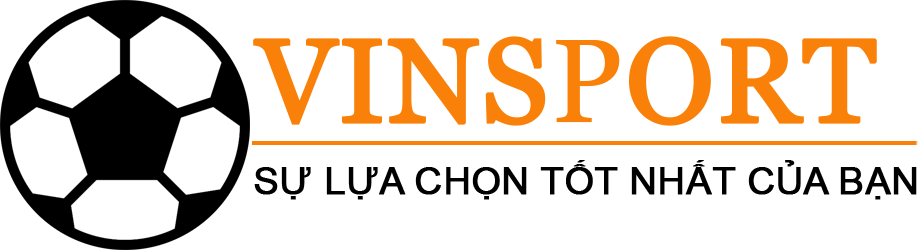
<style>
.page{position:relative;width:918px;height:250px;background:#ffffff}
.page>*{position:absolute;margin:0}
.t1{font:118px "Georgia";color:#fa8109;text-transform:uppercase;font-weight:bold}
.t2{font:37.6px "ArialMT";color:#000000;text-transform:uppercase;font-weight:bold}
</style>
<div class="page">
<p class="t1" style="left:253px;top:36px;width:624px;height:90px">Vinsport</p>
<p class="t2" style="left:254px;top:160px;width:663px;height:40px">SỰ LỰA CHỌN TỐT NHẤT CỦA BẠN</p>
</div>
